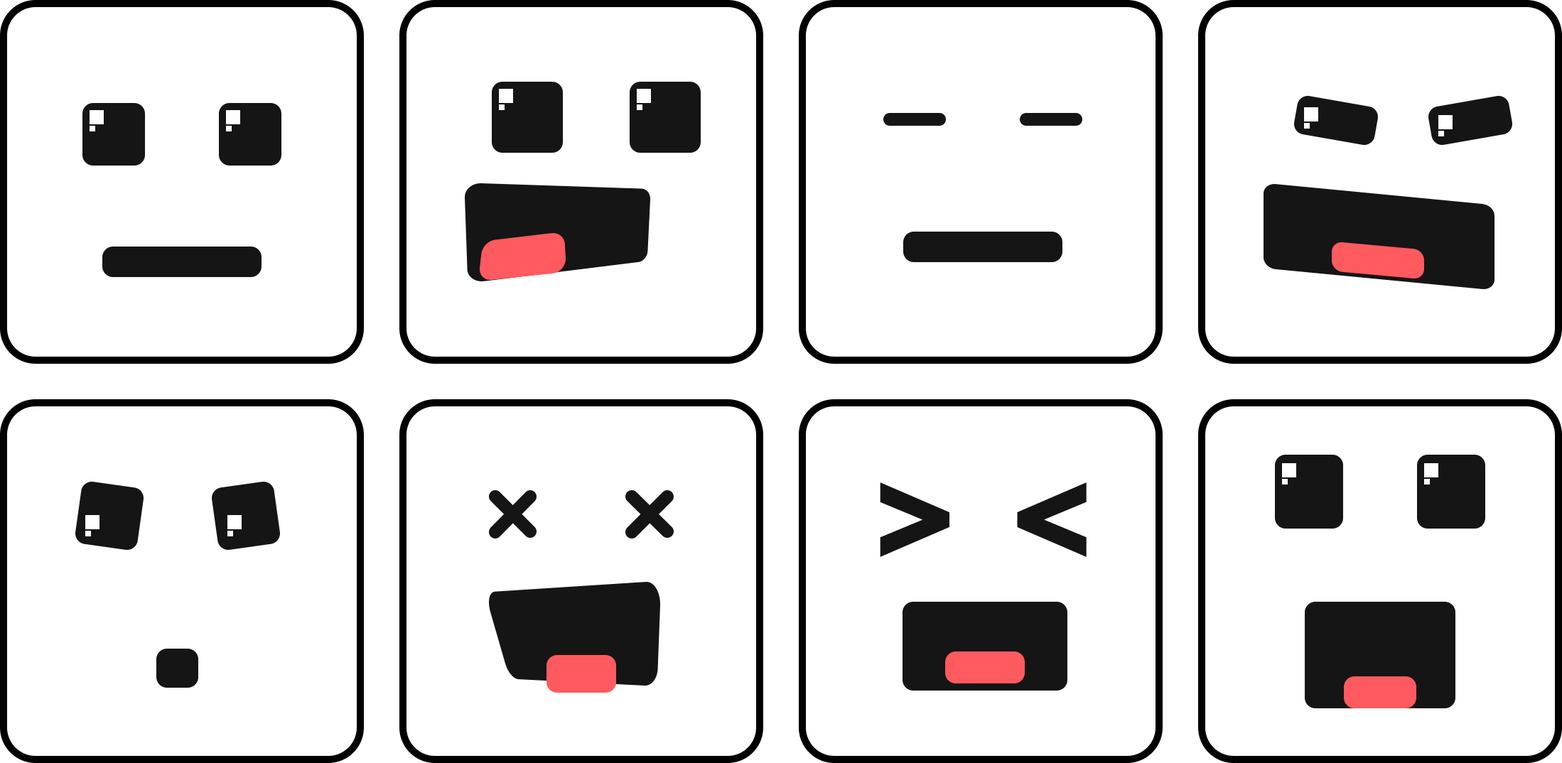
<style>
.page{position:relative;width:1562px;height:763px;background:#ffffff}
.page>*{position:absolute;margin:0}
.t1{font:153px "Impact";letter-spacing:0.3em;color:#151515;scale:0.96 1}
</style>
<div class="page">
<p class="t1" style="left:880px;top:483px;width:207px;height:74px">&gt;&lt;</p>
</div>
